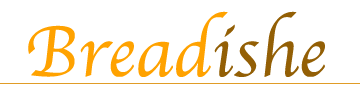
<style>
.page{position:relative;width:360px;height:99px;background:#ffffff}
.page>*{position:absolute;margin:0}
.t1{font:74px "Apple-Chancery";color:#ffa200}
.t2{font:74px "Apple-Chancery";color:#935f05}
</style>
<div class="page">
<p class="t1" style="left:28px;top:11px;width:297px;height:66px">Bread<span class="t2">ishe</span></p>
</div>
